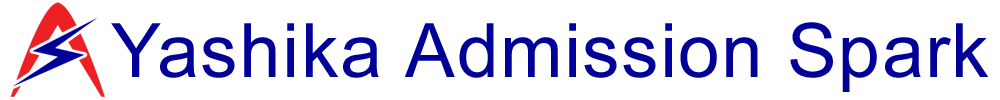
<style>
.page{position:relative;width:1000px;height:100px;background:#ffffff}
.page>*{position:absolute;margin:0}
.t1{font:75px "ArialMT";letter-spacing:0.02em;color:#000099}
</style>
<div class="page">
<p class="t1" style="left:111px;top:22px;width:878px;height:70px">Yashika Admission Spark</p>
</div>
